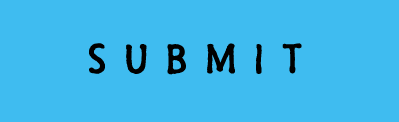
<style>
.page{position:relative;width:399px;height:122px;background:#3fbcf0}
.page>*{position:absolute;margin:0}
.t1{font:41.7px "SegoeMarker";letter-spacing:0.46em;color:#000000;scale:1.11 1}
</style>
<div class="page">
<p class="t1" style="left:89px;top:43px;width:213px;height:32px">SUBMIT</p>
</div>
